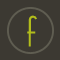
<style>
.page{position:relative;width:60px;height:60px;background:#3c3932}
.page>*{position:absolute;margin:0}
.t1{font:40px "FashionVictim";color:#b2bd1b}
</style>
<div class="page">
<p class="t1" style="left:27px;top:15px;width:10px;height:32px">f</p>
</div>
